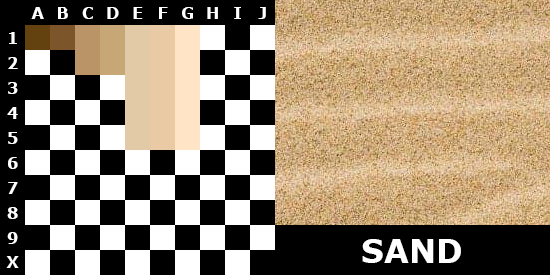
<style>
.page{position:relative;width:550px;height:275px;background:#000000}
.page>*{position:absolute;margin:0}
.t1{font:16px "Verdana-Bold";color:#ffffff}
.t2{font:32px "Verdana-Bold";color:#ffffff}
</style>
<div class="page">
<p class="t1" style="left:31px;top:7px;width:13px;height:12px">A</p>
<p class="t1" style="left:58px;top:7px;width:10px;height:12px">B</p>
<p class="t1" style="left:82px;top:7px;width:11px;height:12px">C</p>
<p class="t1" style="left:107px;top:7px;width:12px;height:12px">D</p>
<p class="t1" style="left:133px;top:7px;width:10px;height:12px">E</p>
<p class="t1" style="left:159px;top:7px;width:9px;height:12px">F</p>
<p class="t1" style="left:182px;top:7px;width:11px;height:12px">G</p>
<p class="t1" style="left:207px;top:7px;width:11px;height:12px">H</p>
<p class="t1" style="left:234px;top:7px;width:7px;height:12px">I</p>
<p class="t1" style="left:258px;top:7px;width:8px;height:12px">J</p>
<p class="t1" style="left:9px;top:32px;width:8px;height:12px">1</p>
<p class="t1" style="left:8px;top:57px;width:10px;height:12px">2</p>
<p class="t1" style="left:8px;top:82px;width:10px;height:12px">3</p>
<p class="t1" style="left:7px;top:107px;width:11px;height:12px">4</p>
<p class="t1" style="left:8px;top:132px;width:10px;height:12px">5</p>
<p class="t1" style="left:8px;top:157px;width:10px;height:12px">6</p>
<p class="t1" style="left:8px;top:182px;width:10px;height:12px">7</p>
<p class="t1" style="left:7px;top:207px;width:11px;height:12px">8</p>
<p class="t1" style="left:7px;top:232px;width:11px;height:12px">9</p>
<p class="t2" style="left:362px;top:239px;width:99px;height:24px">SAND</p>
<p class="t1" style="left:6px;top:256px;width:13px;height:12px">X</p>
</div>
